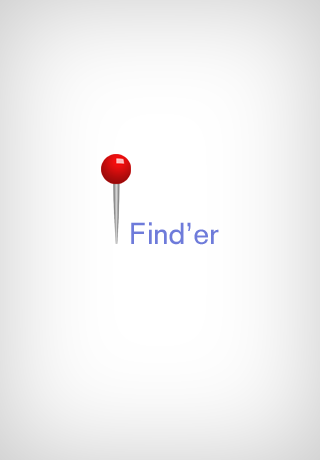
<style>
.page{position:relative;width:320px;height:460px}
.page>*{position:absolute;margin:0}
.t1{font:30px "AkzidenzGrotesk-Roman";color:#6e7bda}
</style>
<div class="page">
<p class="t1" style="left:131px;top:222px;width:88px;height:23px">Find’er</p>
</div>
